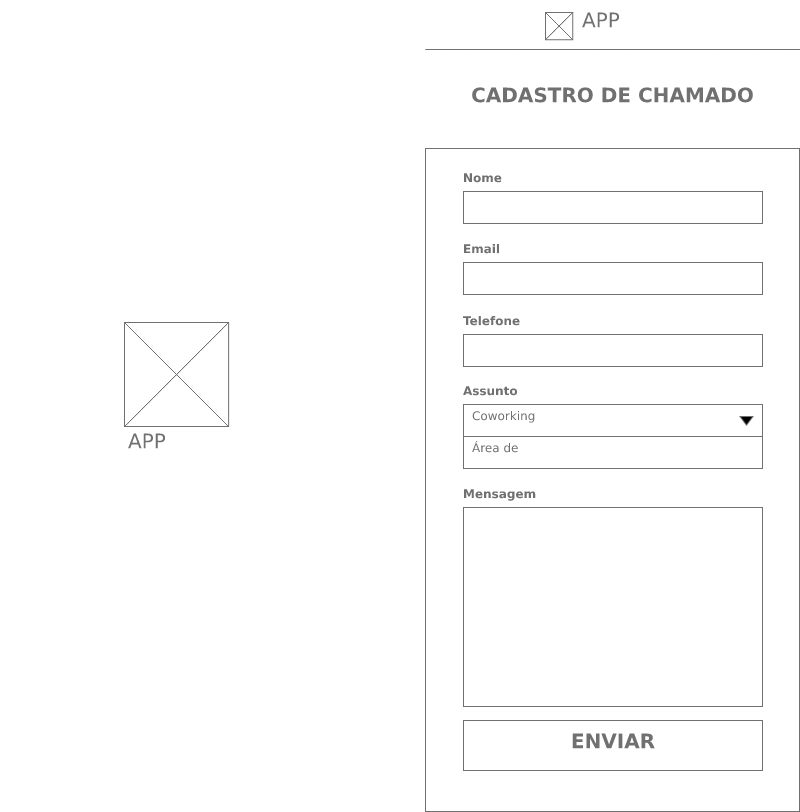
<style>
.page{position:relative;width:800px;height:812px;background:#ffffff}
.page>*{position:absolute;margin:0}
.t1{font:20px "SegoeUI";color:#707070}
.t2{font:20px "SegoeUI-Bold";color:#707070}
.t3{font:12px "SegoeUI-Bold";color:#707070}
.t4{font:12px "SegoeUI";color:#707070}
</style>
<div class="page">
<p class="t1" style="left:582px;top:12px;width:38px;height:16px">APP NAME</p>
<p class="t2" style="left:472px;top:87px;width:281px;height:16px">CADASTRO DE CHAMADO</p>
<p class="t3" style="left:464px;top:173px;width:38px;height:10px">Nome</p>
<p class="t3" style="left:464px;top:244px;width:36px;height:10px">Email</p>
<p class="t3" style="left:463px;top:316px;width:57px;height:10px">Telefone</p>
<p class="t3" style="left:463px;top:386px;width:55px;height:10px">Assunto</p>
<p class="t4" style="left:472px;top:411px;width:63px;height:12px">Coworking</p>
<p class="t1" style="left:128px;top:433px;width:38px;height:16px">APP NAME</p>
<p class="t4" style="left:472px;top:440px;width:46px;height:13px">Área de lazer</p>
<p class="t3" style="left:464px;top:489px;width:72px;height:12px">Mensagem</p>
<p class="t2" style="left:572px;top:733px;width:83px;height:16px">ENVIAR</p>
</div>
